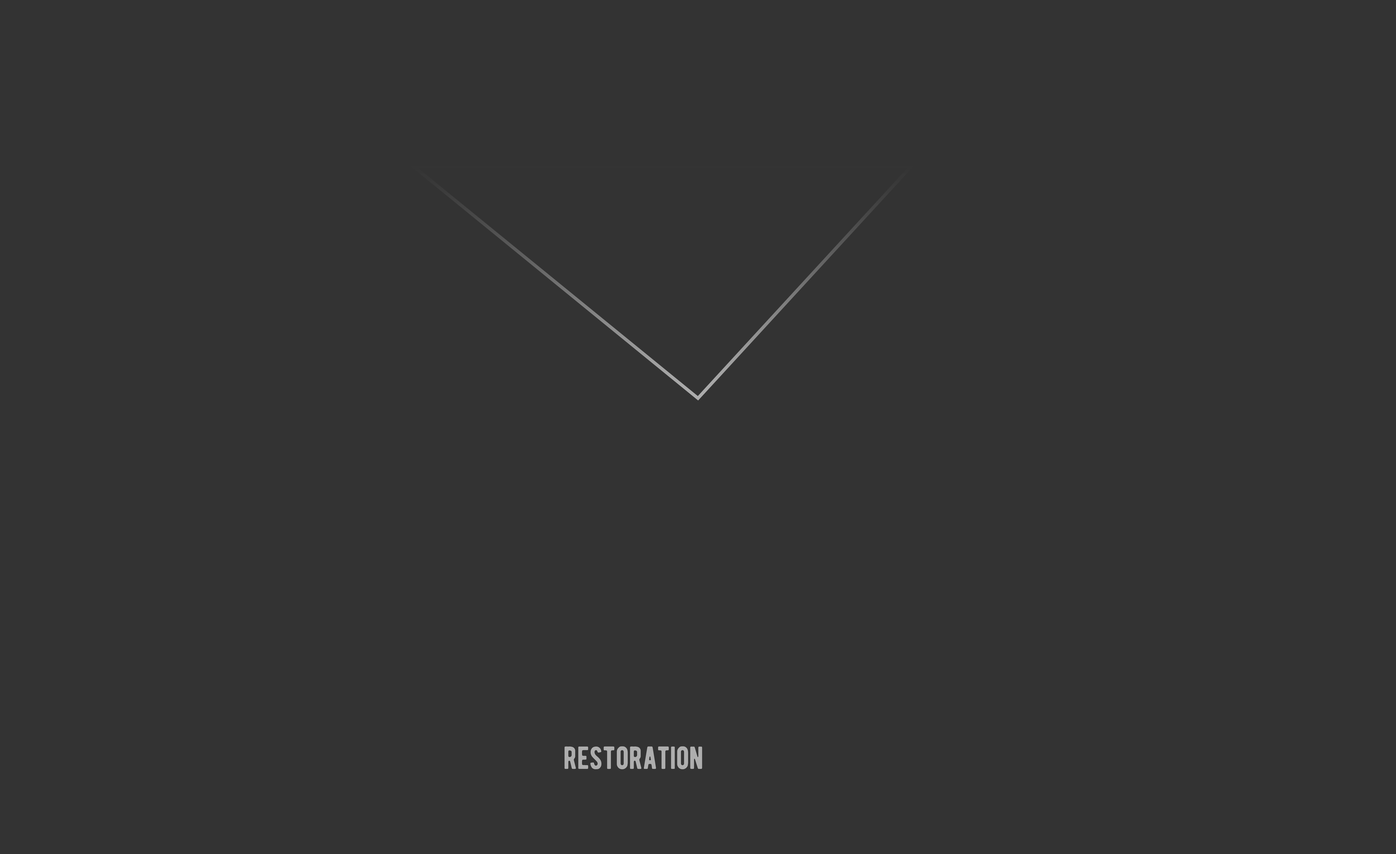
<style>
.page{position:relative;width:1396px;height:854px;background:#333333}
.page>*{position:absolute;margin:0}
.t1{font:31.9px "BERNIERREGULAR";color:#aeaeae}
</style>
<div class="page">
<p class="t1" style="left:564px;top:747px;width:138px;height:23px">restoration</p>
</div>
